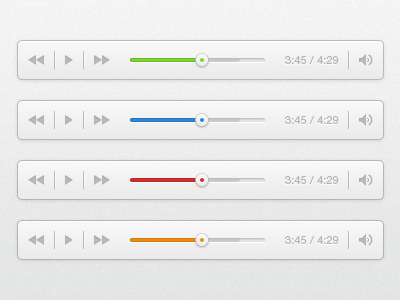
<style>
.page{position:relative;width:400px;height:300px}
.page>*{position:absolute;margin:0}
.t1{font:11px "HelveticaNeueLTPro-Roman";letter-spacing:0.01em;color:#b3b6b6}
</style>
<div class="page">
<p class="t1" style="left:285px;top:56px;width:54px;height:8px">3:45 / 4:29</p>
<p class="t1" style="left:285px;top:116px;width:54px;height:8px">3:45 / 4:29</p>
<p class="t1" style="left:285px;top:176px;width:54px;height:8px">3:45 / 4:29</p>
<p class="t1" style="left:285px;top:236px;width:54px;height:8px">3:45 / 4:29</p>
</div>
